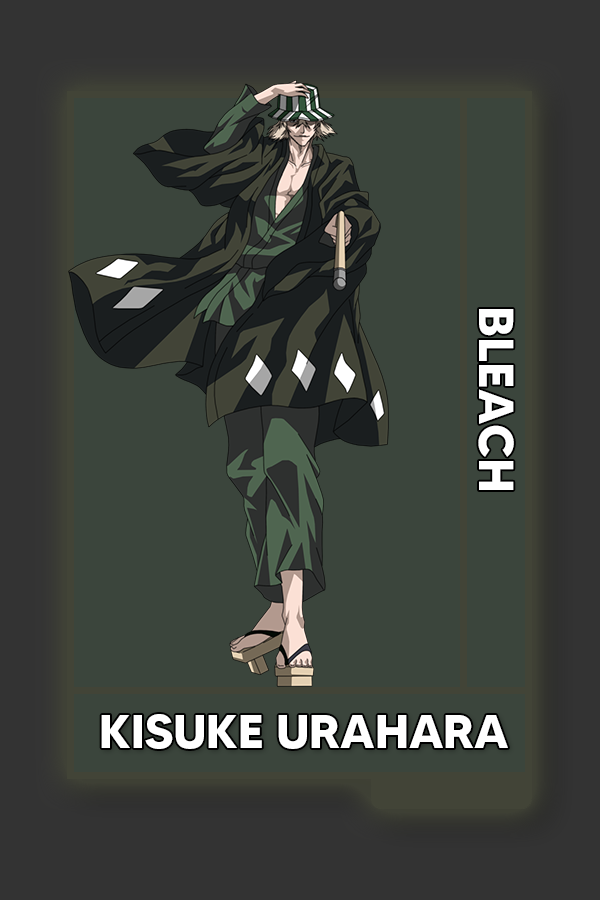
<style>
.page{position:relative;width:600px;height:900px;background:#3b453c}
.page>*{position:absolute;margin:0}
.t1{font:48.8px "MADETOMMY-Bold";color:#ffffff}
.t2{font:47.5px "MADETOMMY-Bold";color:#ffffff}
</style>
<div class="page">
<p class="t1" style="left:478px;top:309px;width:36px;height:181px;rotate:90deg">BLEACH</p>
<p class="t2" style="left:101px;top:714px;width:407px;height:35px">KISUKE URAHARA</p>
</div>
